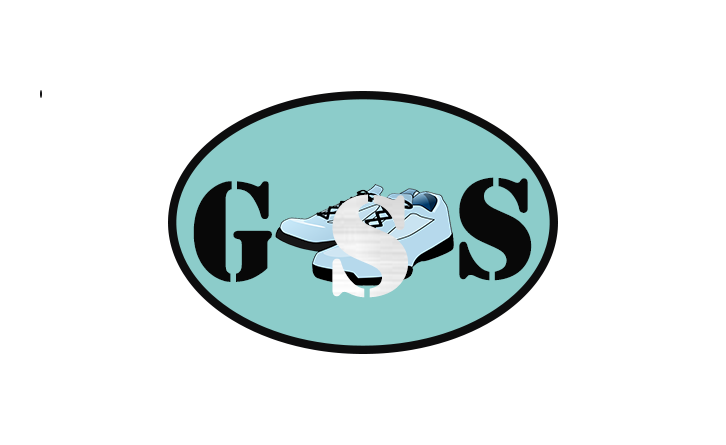
<style>
.page{position:relative;width:726px;height:445px;background:#ffffff}
.page>*{position:absolute;margin:0}
.t1{font:145px "Stencil";letter-spacing:-0.01em;color:#080808;scale:0.95 1}
.t2{font:147.7px "Stencil";letter-spacing:-0.01em;color:#080808}
.t3{font:147.7px "Stencil";letter-spacing:-0.01em;color:#fafbfc;scale:1.05 1}
</style>
<div class="page">
<p class="t1" style="left:193px;top:181px;width:79px;height:101px">G</p>
<p class="t2" style="left:459px;top:177px;width:73px;height:104px">S</p>
<p class="t3" style="left:332px;top:194px;width:76px;height:104px">S</p>
</div>
